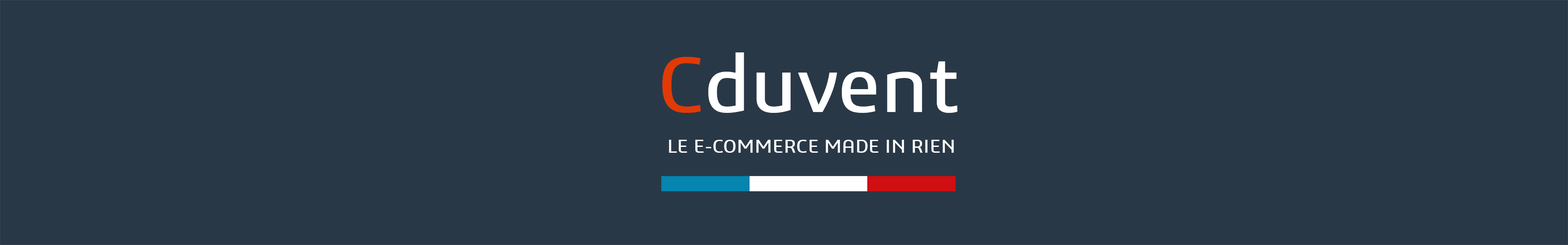
<style>
.page{position:relative;width:1568px;height:245px;background:#293847}
.page>*{position:absolute;margin:0}
.t1{font:81.7px "3ds";color:#ffffff}
.t2{font:81.7px "3ds";color:#e23a05}
.t3{font:19.6px "3ds";color:#ffffff}
</style>
<div class="page">
<p class="t1" style="left:662px;top:52px;width:295px;height:61px"><span class="t2">C</span>duvent</p>
<p class="t3" style="left:669px;top:140px;width:285px;height:13px">LE E-COMMERCE MADE IN RIEN</p>
</div>
